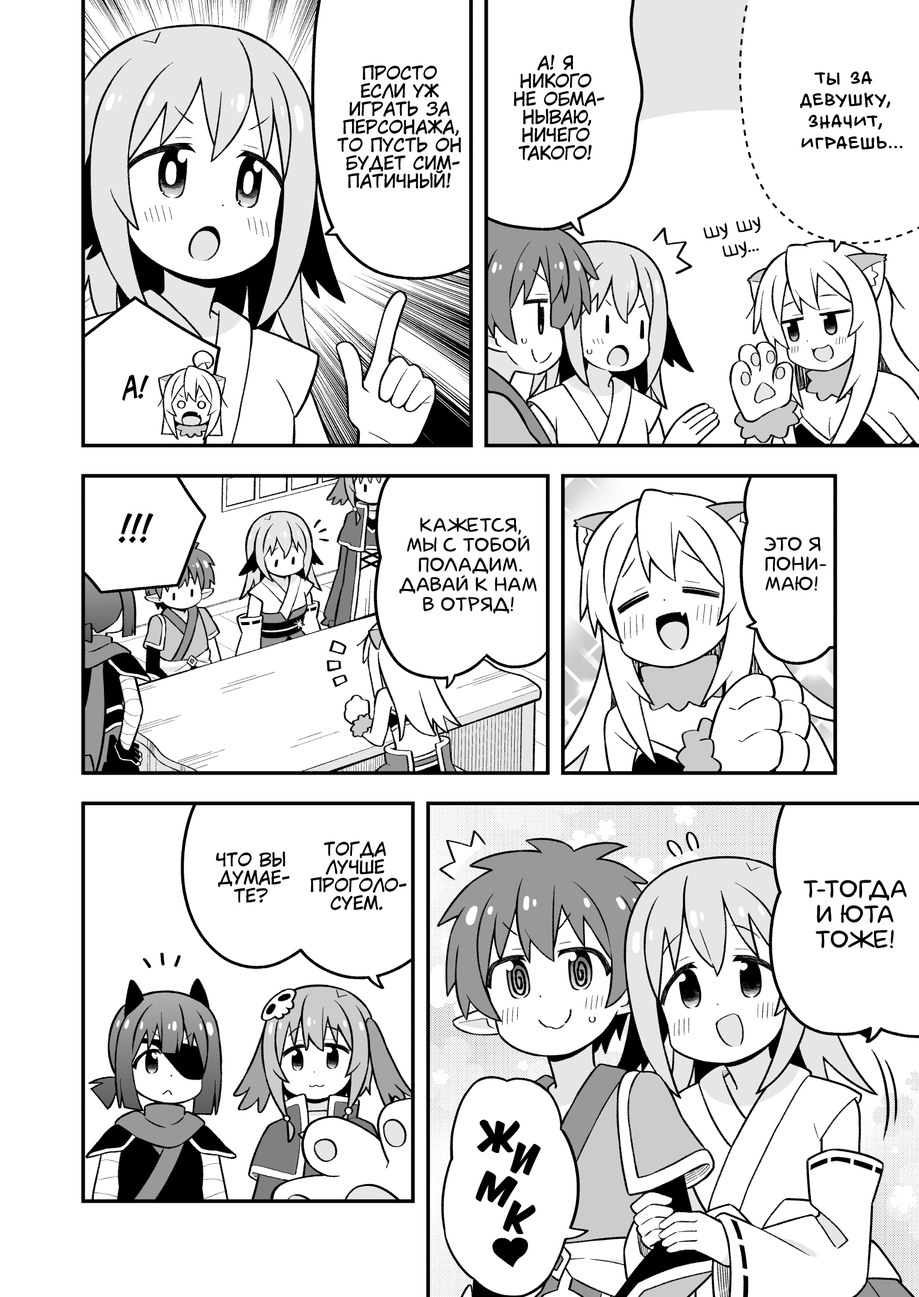
<style>
.page{position:relative;width:919px;height:1297px;background:#ffffff}
.page>*{position:absolute;margin:0}
.t1{font:18px "KuraiVoice2";color:#000000;text-transform:uppercase}
.t2{font:21.6px "v_BillyTheFlyingRobotBBLC";color:#000000;text-transform:uppercase}
.t3{font:21.6px "v_Augie";color:#000000}
.t4{font:28.8px "v_CCJeffCampbell";color:#000000;text-transform:uppercase}
.t5{font:36px "v_CCJeffCampbell";color:#000000;text-transform:uppercase}
.t6{font:19.8px "laCartoonerie";color:#000000;text-transform:uppercase}
.t7{font:25.2px "laCartoonerie";color:#000000;text-transform:uppercase}
.t8{font:36px "KomikaTitle-AxisRUS-LAT";color:#000000;text-transform:uppercase}
</style>
<div class="page">
<p class="t1" style="left:337px;top:65px;width:124px;height:124px;text-align:center">Просто<br>если уж<br>играть за<br>персонажа,<br>то пусть он<br>будет сим-<br>патичный!</p>
<p class="t1" style="left:514px;top:55px;width:90px;height:106px;text-align:center">А! Я<br>никого<br>не обма-<br>нываю,<br>ничего<br>такого!</p>
<p class="t2" style="left:800px;top:71px;width:103px;height:79px;text-align:center">Ты за<br>девушку,<br>значит,<br>играешь...</p>
<p class="t3" style="left:703px;top:216px;width:57px;height:42px;text-align:center;rotate:-11deg">шу шу<br>шу...</p>
<p class="t4" style="left:122px;top:375px;width:27px;height:26px">А!</p>
<p class="t5" style="left:118px;top:514px;width:36px;height:30px">!!!</p>
<p class="t6" style="left:399px;top:518px;width:138px;height:96px;text-align:center">Кажется,<br>мы с тобой<br>поладим.<br>Давай к нам<br>в отряд!</p>
<p class="t6" style="left:764px;top:537px;width:63px;height:54px;text-align:center">Это я<br>пони-<br>маю!</p>
<p class="t1" style="left:311px;top:842px;width:96px;height:69px;text-align:center">Тогда<br>лучше<br>проголо-<br>суем.</p>
<p class="t1" style="left:216px;top:852px;width:74px;height:51px;text-align:center">Что вы<br>думае-<br>те?</p>
<p class="t7" style="left:804px;top:880px;width:103px;height:68px;text-align:center">Т-тогда<br>и Юта<br>тоже!</p>
<p class="t8" style="left:477px;top:1120px;width:43px;height:34px">ж</p>
<p class="t8" style="left:510px;top:1142px;width:31px;height:34px;rotate:8deg">и</p>
<p class="t8" style="left:475px;top:1171px;width:43px;height:37px;rotate:15deg">м</p>
<p class="t8" style="left:503px;top:1201px;width:33px;height:34px;rotate:14deg">к</p>
</div>
